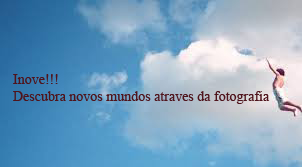
<style>
.page{position:relative;width:302px;height:167px}
.page>*{position:absolute;margin:0}
.t1{font:14px "TimesNewRomanPSMT";color:#4f141c}
</style>
<div class="page">
<p class="t1" style="left:13px;top:74px;width:257px;height:30px">Inove!!!<br>Descubra novos mundos atraves da fotografia</p>
</div>
